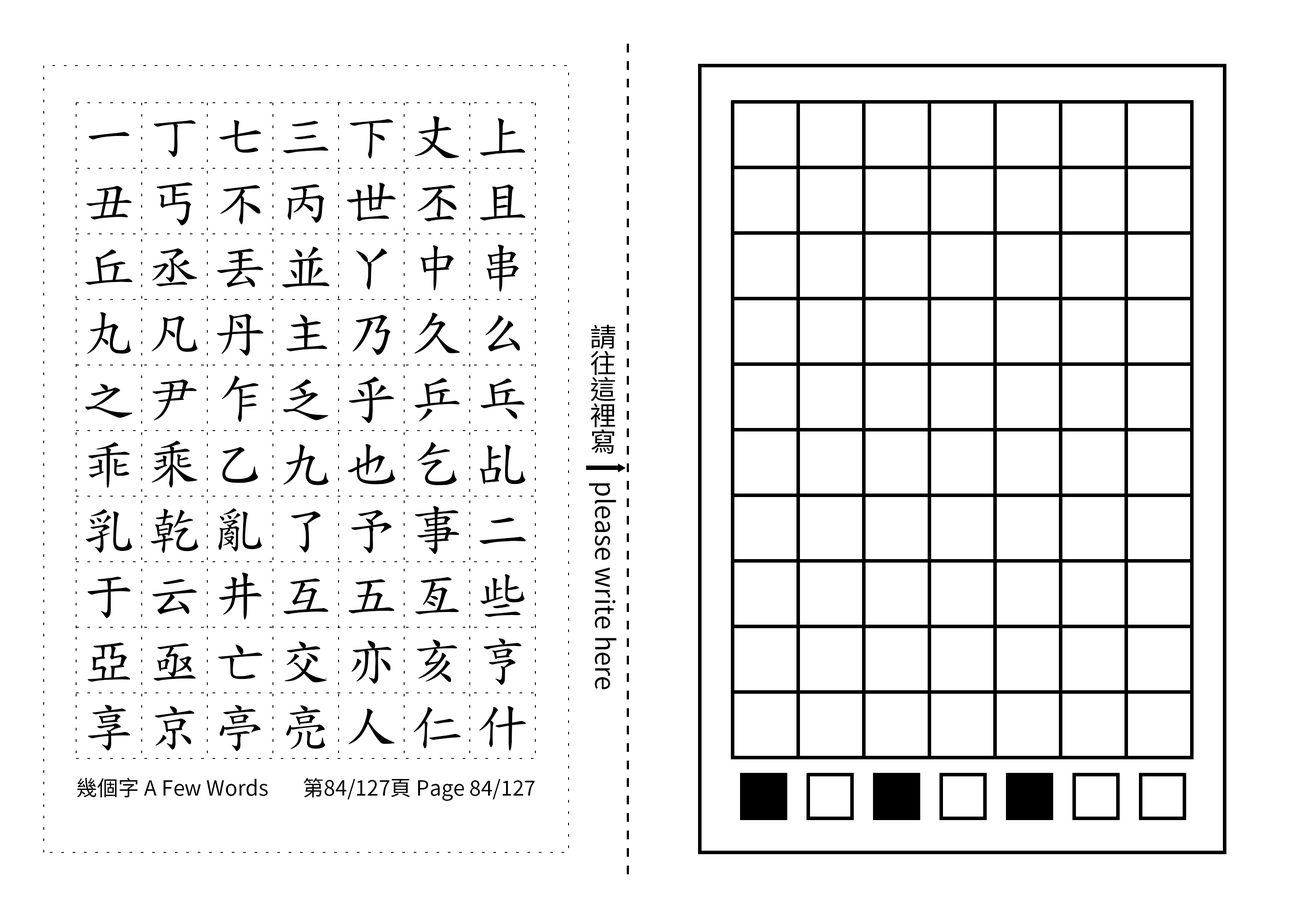
<style>
.page{position:relative;width:1299px;height:918px;background:#ffffff}
.page>*{position:absolute;margin:0}
.t1{font:52.5px/65.6px "TW-Kai-98_1";letter-spacing:0.25em;color:#000000}
.t2{font:26.2px "SourceHanSansTC-Regular";color:#000000}
.t3{font:21px "SourceHanSansTC-Regular";color:#000000}
</style>
<div class="page">
<p class="t1" style="left:85px;top:116px;width:441px;height:636px;text-align:center">一丁七三下丈上丑丐不丙世丕且丘丞丟並丫中串丸凡丹主乃久么之尹乍乏乎乒乓乖乘乙九也乞乩乳乾亂了予事二于云井互五亙些亞亟亡交亦亥亨享京亭亮人仁什</p>
<p class="t2" style="left:589px;top:324px;width:28px;height:366px;text-align:center">請往這裡寫　please write here</p>
<p class="t3" style="left:77px;top:778px;width:191px;height:20px">幾個字 A Few Words</p>
<p class="t3" style="left:303px;top:778px;width:232px;height:23px">第84/127頁 Page 84/127</p>
</div>
